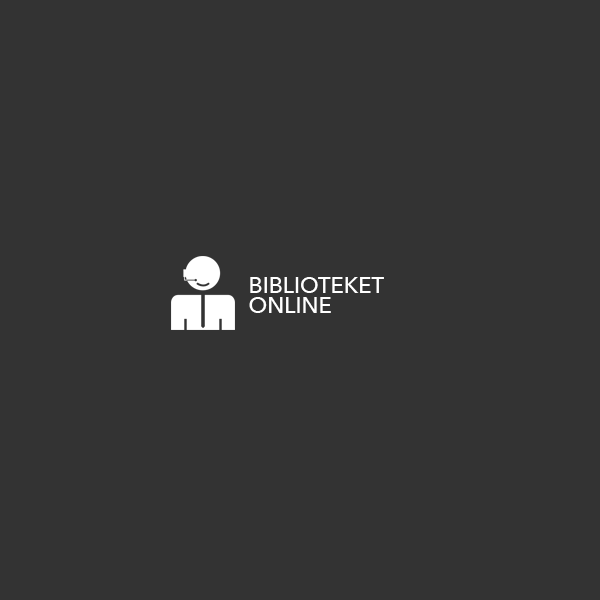
<style>
.page{position:relative;width:600px;height:600px;background:#333333}
.page>*{position:absolute;margin:0}
.t1{font:22px/20px "AvenirNext-Medium";color:#ffffff}
</style>
<div class="page">
<p class="t1" style="left:249px;top:277px;width:135px;height:36px">BIBLIOTEKET<br>ONLINE</p>
</div>
